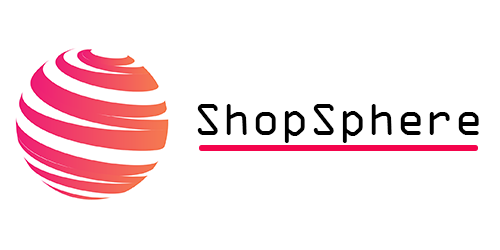
<style>
.page{position:relative;width:500px;height:250px;background:#ffffff}
.page>*{position:absolute;margin:0}
.t1{font:48px "OCRAExtended";color:#000000}
</style>
<div class="page">
<p class="t1" style="left:197px;top:104px;width:282px;height:39px">ShopSphere</p>
</div>
